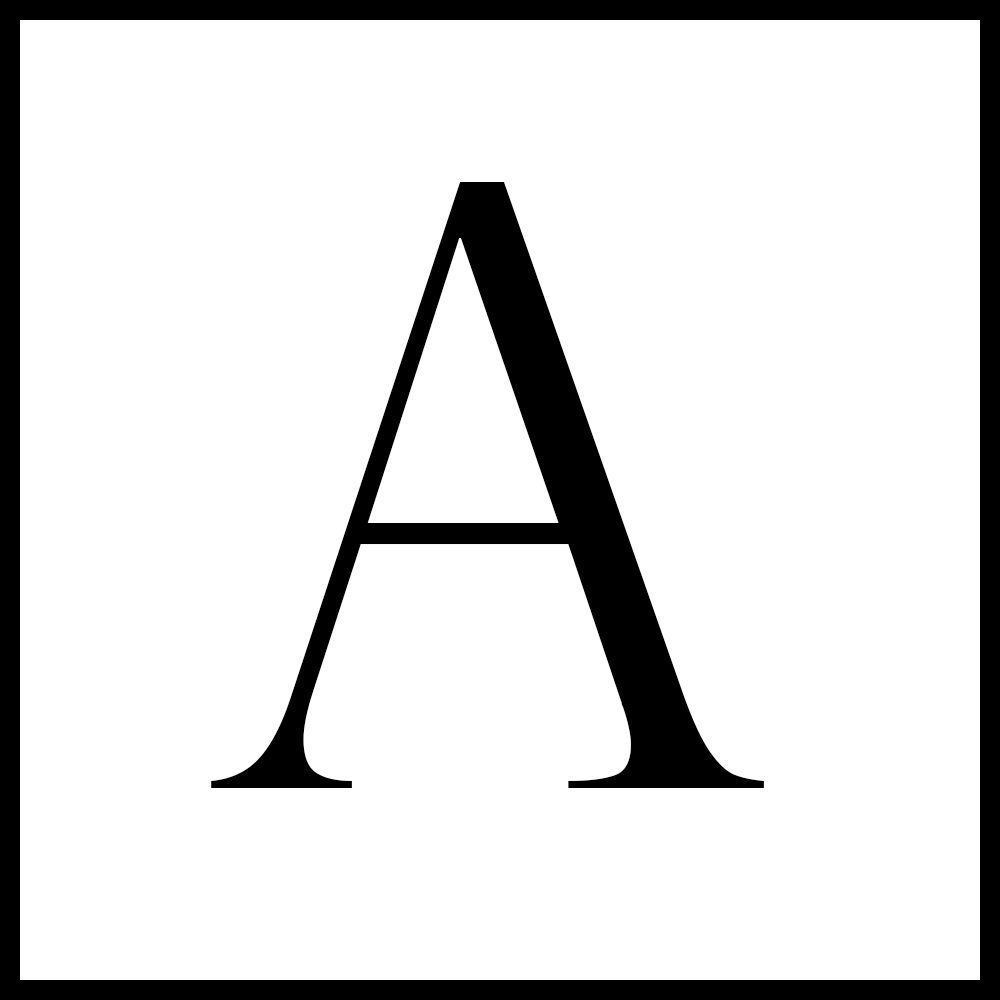
<style>
.page{position:relative;width:1000px;height:1000px;background:#ffffff}
.page>*{position:absolute;margin:0}
.t1{font:833.3px "PerpetuaTitlingMT-Light";color:#000000}
</style>
<div class="page">
<p class="t1" style="left:211px;top:182px;width:553px;height:606px">A</p>
</div>
